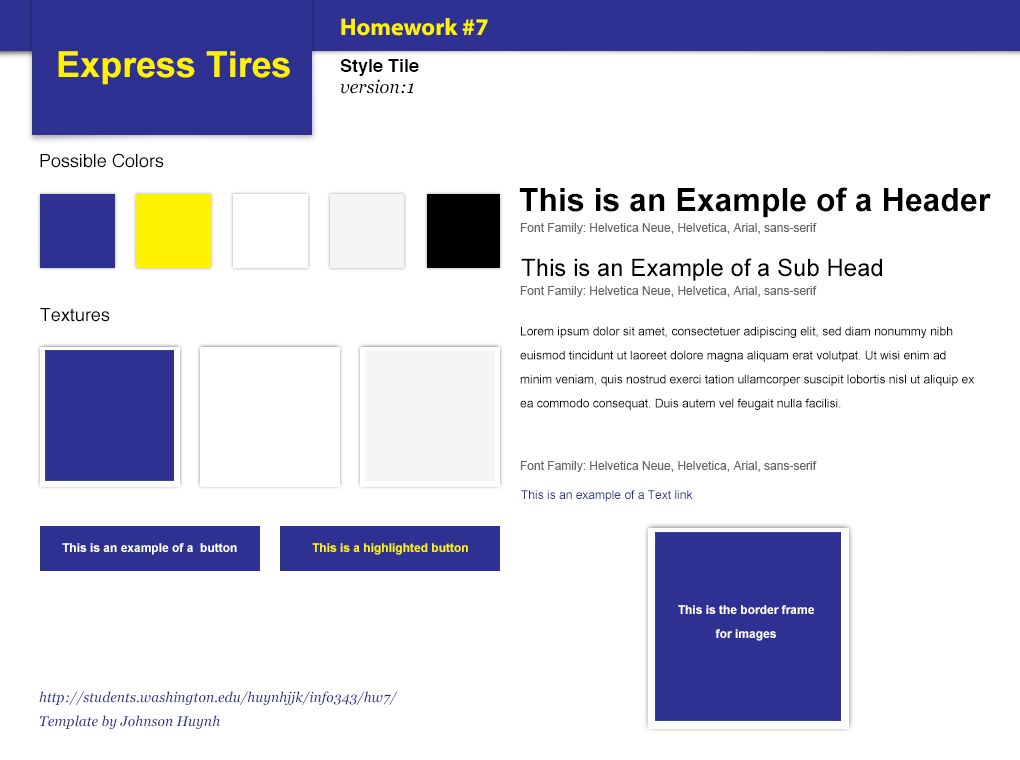
<style>
.page{position:relative;width:1020px;height:760px;background:#ffffff}
.page>*{position:absolute;margin:0}
.t1{font:24px "MyriadPro-Bold";color:#fff200}
.t2{font:36px "Arial-BoldMT";color:#fff200}
.t3{font:18px "Helvetica-Bold";color:#000000}
.t4{font:18px "Georgia-Italic";color:#000000}
.t5{font:18px "Helvetica";color:#000000}
.t6{font:32px "Arial-BoldMT";color:#000000}
.t7{font:12px "ArialMT";color:#666666}
.t8{font:24px "ArialMT";color:#000000}
.t9{font:12px/24px "ArialMT";color:#000000}
.t10{font:12px "ArialMT";color:#2e3192}
.t11{font:12px "Arial-BoldMT";color:#ffffff}
.t12{font:12px "Arial-BoldMT";color:#fff200}
.t13{font:12px/24px "Arial-BoldMT";color:#ffffff}
.t14{font:14px/24px "Georgia-Italic";color:#2e3192}
</style>
<div class="page">
<p class="t1" style="left:341px;top:18px;width:147px;height:18px">Homework #7</p>
<p class="t2" style="left:58px;top:51px;width:232px;height:34px">Express Tires</p>
<p class="t3" style="left:340px;top:59px;width:79px;height:17px">Style Tile</p>
<p class="t4" style="left:340px;top:79px;width:74px;height:15px">version:1</p>
<p class="t5" style="left:40px;top:153px;width:124px;height:15px">Possible Colors</p>
<p class="t6" style="left:519px;top:187px;width:472px;height:31px">This is an Example of a Header</p>
<p class="t7" style="left:520px;top:223px;width:297px;height:11px">Font Family: Helvetica Neue, Helvetica, Arial, sans-serif</p>
<p class="t8" style="left:521px;top:258px;width:361px;height:23px">This is an Example of a Sub Head</p>
<p class="t7" style="left:520px;top:286px;width:297px;height:11px">Font Family: Helvetica Neue, Helvetica, Arial, sans-serif</p>
<p class="t5" style="left:40px;top:308px;width:70px;height:14px">Textures</p>
<p class="t9" style="left:520px;top:326px;width:455px;height:84px">Lorem ipsum dolor sit amet, consectetuer adipiscing elit, sed diam nonummy nibh euismod tincidunt ut laoreet dolore magna aliquam erat volutpat. Ut wisi enim ad minim veniam, quis nostrud exerci tation ullamcorper suscipit lobortis nisl ut aliquip ex ea commodo consequat. Duis autem vel feugait nulla facilisi.</p>
<p class="t7" style="left:520px;top:461px;width:297px;height:11px">Font Family: Helvetica Neue, Helvetica, Arial, sans-serif</p>
<p class="t10" style="left:521px;top:490px;width:172px;height:12px">This is an example of a Text link</p>
<p class="t11" style="left:62px;top:543px;width:175px;height:12px">This is an example of a  button</p>
<p class="t12" style="left:312px;top:543px;width:156px;height:12px">This is a highlighted button</p>
<p class="t13" style="left:678px;top:605px;width:136px;height:36px;text-align:center">This is the border frame<br>for images</p>
<p class="t14" style="left:39px;top:691px;width:359px;height:38px">http://students.washington.edu/huynhjjk/info343/hw7/<br>Template by Johnson Huynh</p>
</div>
